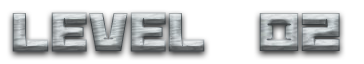
<style>
.page{position:relative;width:364px;height:64px;background:#ffffff}
.page>*{position:absolute;margin:0}
.t1{font:60px "BananaBrick"}
</style>
<div class="page">
<p class="t1" style="left:12px;top:12px;width:328px;height:40px">Level  02</p>
</div>
